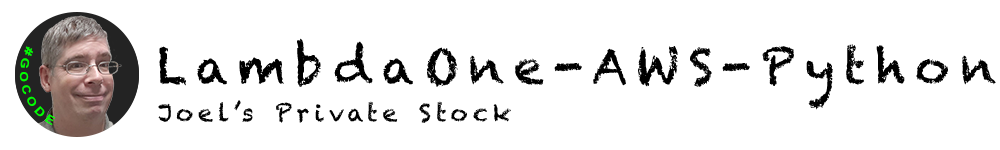
<style>
.page{position:relative;width:1000px;height:150px;background:#ffffff}
.page>*{position:absolute;margin:0}
.t1{font:48px "Chalkduster";letter-spacing:0.2em;color:#000000}
.t2{font:11.2px "Arial-BoldMT";letter-spacing:0.2em;color:#00ff00}
.t3{font:24px "Chalkduster";letter-spacing:0.2em;color:#000000}
</style>
<div class="page">
<p class="t1" style="left:159px;top:38px;width:837px;height:72px">LambdaOne-AWS-Python</p>
<p class="t2" style="left:19px;top:46px;width:37px;height:80px;rotate:72deg">#GOCODE</p>
<p class="t3" style="left:158px;top:100px;width:353px;height:23px">Joel’s Private Stock</p>
</div>
